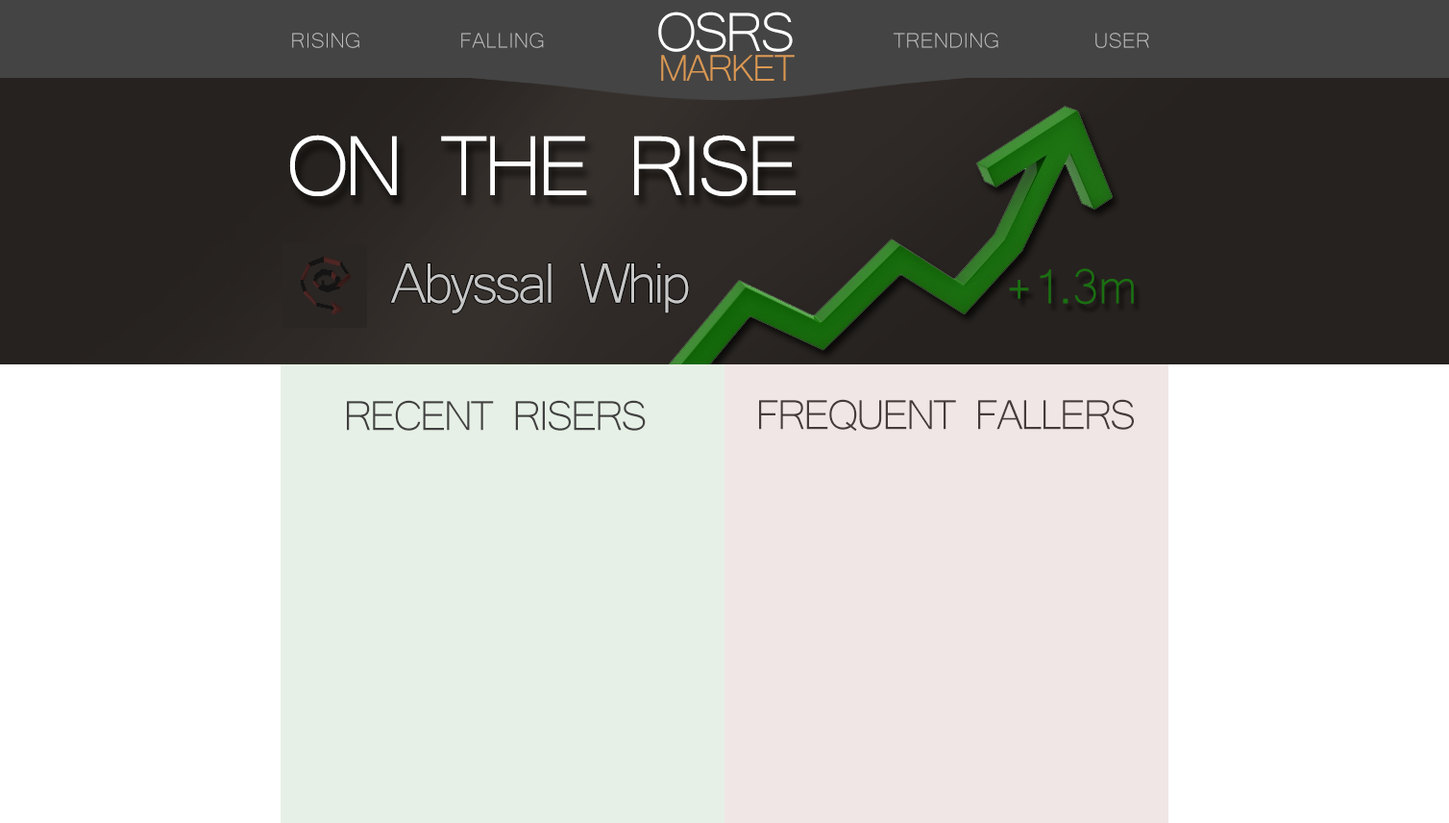
<style>
.page{position:relative;width:1449px;height:823px;background:#ffffff}
.page>*{position:absolute;margin:0}
.t1{font:71.1px "Microsoft-Yi-Baiti";letter-spacing:-0.06em;color:#ffffff}
.t2{font:26.9px "Microsoft-Yi-Baiti";color:#bebebe}
.t3{font:48.1px "Microsoft-Yi-Baiti";letter-spacing:-0.06em;color:#d99852}
.t4{font:109.6px "Microsoft-Yi-Baiti";letter-spacing:-0.06em;color:#ffffff}
.t5{font:73px "Microsoft-Yi-Baiti";letter-spacing:-0.06em;color:#c6c6c6}
.t6{font:63.4px "Microsoft-Yi-Baiti";letter-spacing:-0.06em;color:#1a6f11}
.t7{font:53.8px "Microsoft-Yi-Baiti";letter-spacing:-0.06em;color:#414141}
</style>
<div class="page">
<p class="t1" style="left:658px;top:12px;width:135px;height:40px">OSRS</p>
<p class="t2" style="left:292px;top:33px;width:67px;height:15px">RISING</p>
<p class="t2" style="left:461px;top:33px;width:83px;height:15px">FALLING</p>
<p class="t2" style="left:894px;top:33px;width:105px;height:15px">TRENDING</p>
<p class="t2" style="left:1096px;top:33px;width:54px;height:15px">USER</p>
<p class="t3" style="left:661px;top:55px;width:134px;height:26px">MARKET</p>
<p class="t4" style="left:289px;top:135px;width:507px;height:61px">ON THE RISE</p>
<p class="t5" style="left:391px;top:263px;width:298px;height:50px">Abyssal Whip</p>
<p class="t6" style="left:1009px;top:268px;width:125px;height:37px">+1.3m</p>
<p class="t7" style="left:347px;top:400px;width:299px;height:31px">RECENT RISERS</p>
<p class="t7" style="left:759px;top:399px;width:375px;height:33px">FREQUENT FALLERS</p>
</div>
